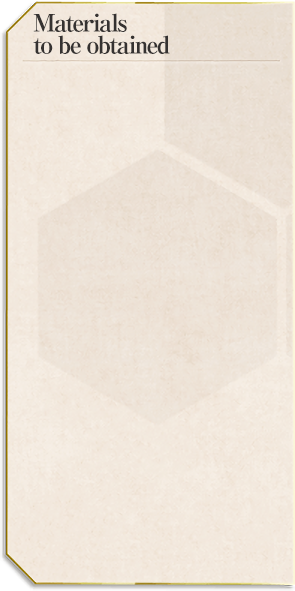
<style>
.page{position:relative;width:295px;height:591px}
.page>*{position:absolute;margin:0}
.t1{font:24px/22px "RyuminPro-ExBold";letter-spacing:-0.08em;color:#353231}
</style>
<div class="page">
<p class="t1" style="left:33px;top:13px;width:137px;height:41px">Materials<br>to be obtained</p>
</div>
